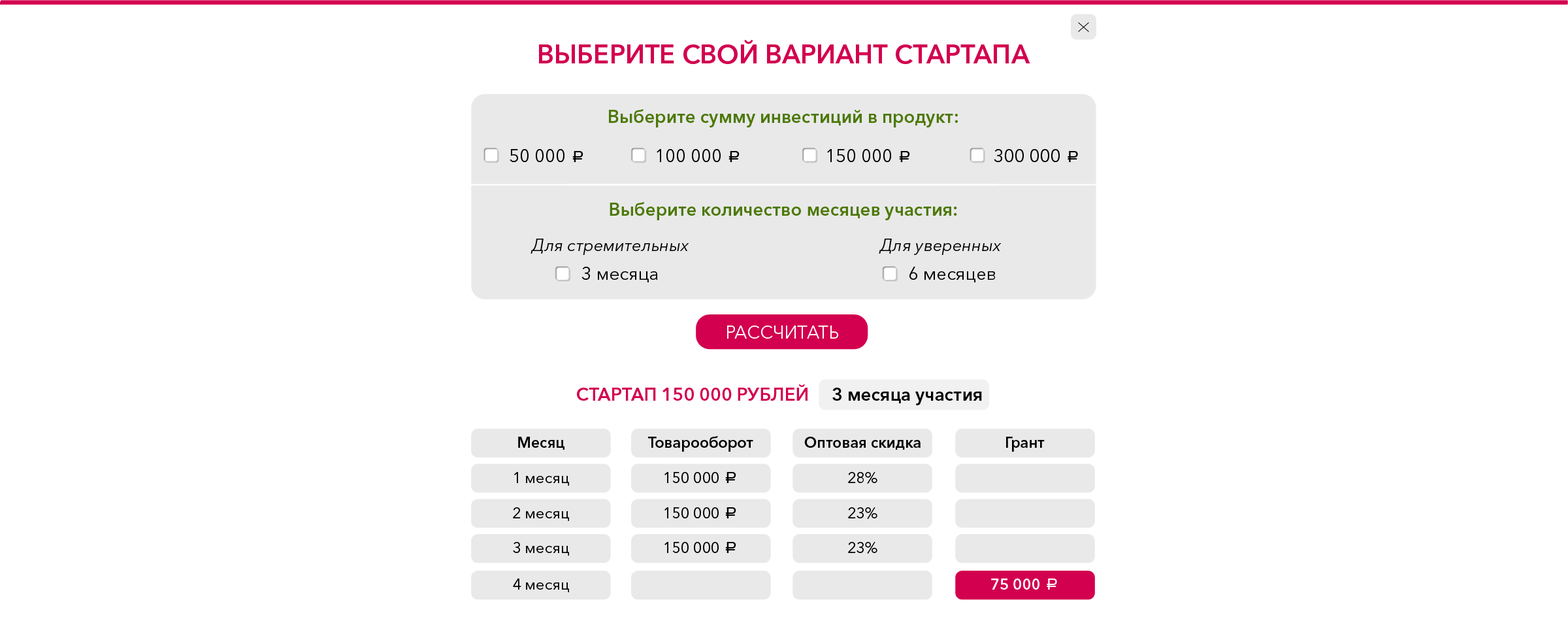
<style>
.page{position:relative;width:1568px;height:638px;background:#ffffff}
.page>*{position:absolute;margin:0}
.t1{font:26px "AvenirNextCyr-Demi";color:#d2004f;text-transform:uppercase}
.t2{font:18.1px "AvenirNextCyr-Demi";color:#4c7807}
.t3{font:18.1px "AvenirNextCyr-Regular";color:#000000}
.t4{font:16.6px "ALSRubl";color:#000000}
.t5{font:16.6px "AvenirNextCyr-Italic";color:#000000}
.t6{font:18.1px "AvenirNextCyr-Regular";color:#ffffff;text-transform:uppercase}
.t7{font:18.1px "AvenirNextCyr-Demi";color:#d2004f}
.t8{font:18.1px "AvenirNextCyr-Demi";color:#000000}
.t9{font:15.2px "AvenirNextCyr-Demi";color:#000000}
.t10{font:15.2px "AvenirNextCyr-Regular";color:#000000}
.t11{font:15.2px "AvenirNextCyr-Demi";color:#ffffff}
.t12{font:16.6px "ALSRubl";color:#ffffff}
</style>
<div class="page">
<p class="t1" style="left:539px;top:40px;width:491px;height:24px">Выберите свой вариант стартапа</p>
<p class="t2" style="left:609px;top:109px;width:349px;height:18px">Выберите сумму инвестиций в продукт:</p>
<p class="t3" style="left:510px;top:149px;width:73px;height:13px">50 000 <span class="t4">a</span></p>
<p class="t3" style="left:657px;top:149px;width:83px;height:13px">100 000 <span class="t4">a</span></p>
<p class="t3" style="left:827px;top:149px;width:83px;height:13px">150 000 <span class="t4">a</span></p>
<p class="t3" style="left:994px;top:149px;width:84px;height:13px">300 000 <span class="t4">a</span></p>
<p class="t2" style="left:610px;top:202px;width:347px;height:18px">Выберите количество месяцев участия:</p>
<p class="t5" style="left:531px;top:238px;width:158px;height:17px">Для стремительных</p>
<p class="t5" style="left:879px;top:238px;width:123px;height:17px">Для уверенных</p>
<p class="t3" style="left:581px;top:267px;width:77px;height:15px">3 месяца</p>
<p class="t3" style="left:909px;top:267px;width:86px;height:15px">6 месяцев</p>
<p class="t6" style="left:727px;top:325px;width:111px;height:13px">Рассчитать</p>
<p class="t7" style="left:577px;top:384px;width:405px;height:21px">СТАРТАП 150 000 РУБЛЕЙ<span class="t8">     3 месяца участия</span></p>
<p class="t9" style="left:518px;top:436px;width:46px;height:13px">Месяц</p>
<p class="t9" style="left:648px;top:436px;width:105px;height:15px">Товарооборот</p>
<p class="t9" style="left:804px;top:436px;width:117px;height:13px">Оптовая скидка</p>
<p class="t9" style="left:1006px;top:436px;width:39px;height:15px">Грант</p>
<p class="t10" style="left:514px;top:472px;width:55px;height:13px">1 месяц</p>
<p class="t10" style="left:664px;top:472px;width:72px;height:11px">150 000 <span class="t4">a</span></p>
<p class="t10" style="left:848px;top:472px;width:29px;height:11px">28%</p>
<p class="t10" style="left:513px;top:507px;width:56px;height:14px">2 месяц</p>
<p class="t10" style="left:664px;top:507px;width:72px;height:11px">150 000 <span class="t4">a</span></p>
<p class="t10" style="left:848px;top:507px;width:29px;height:12px">23%</p>
<p class="t10" style="left:513px;top:542px;width:56px;height:13px">3 месяц</p>
<p class="t10" style="left:664px;top:542px;width:72px;height:11px">150 000 <span class="t4">a</span></p>
<p class="t10" style="left:848px;top:542px;width:29px;height:11px">23%</p>
<p class="t10" style="left:513px;top:578px;width:56px;height:14px">4 месяц</p>
<p class="t11" style="left:991px;top:578px;width:66px;height:11px">75 000 <span class="t12">a</span></p>
</div>
